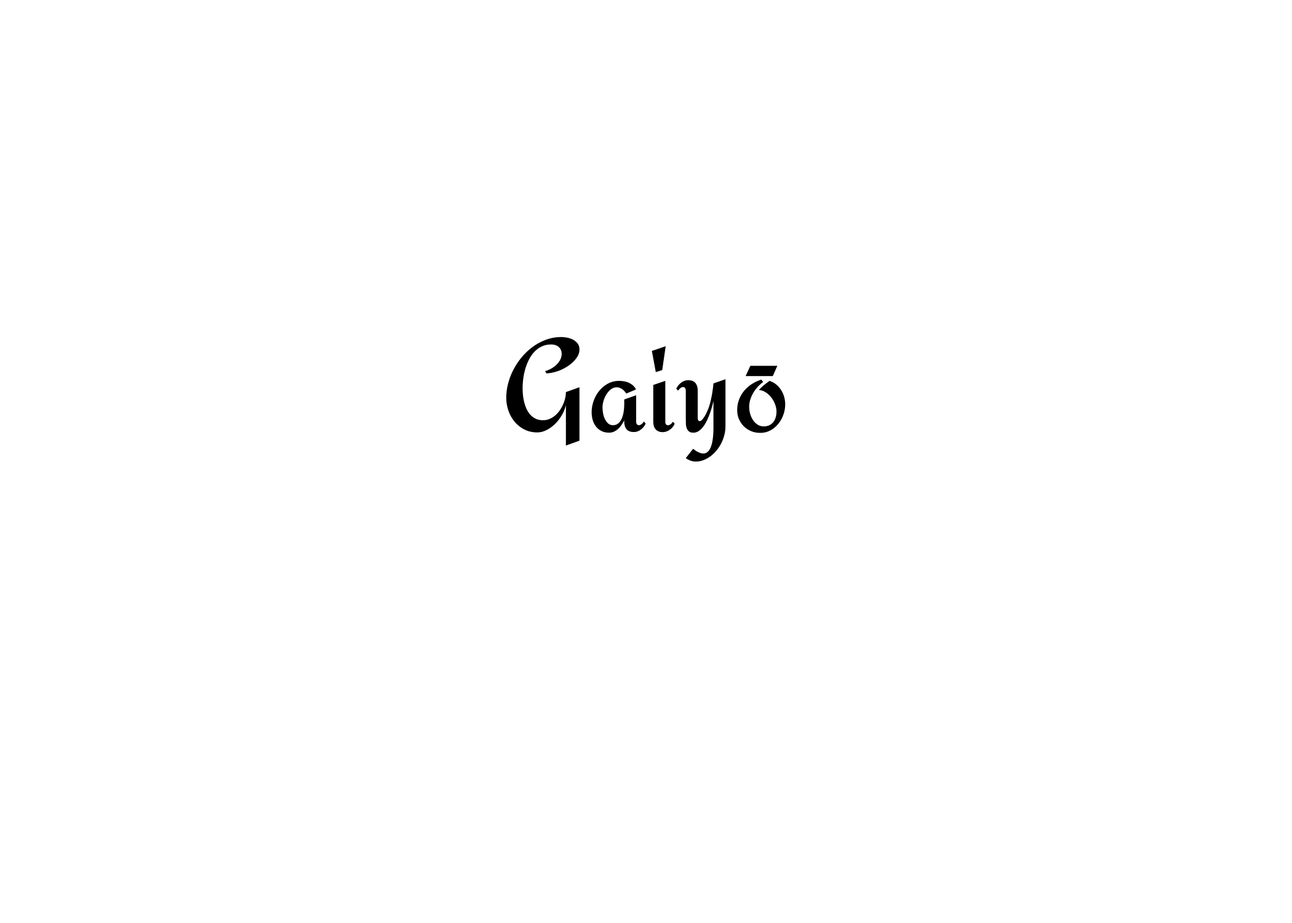
<style>
.page{position:relative;width:1292px;height:923px;background:#ffffff}
.page>*{position:absolute;margin:0}
.t1{font:133.3px "Redressed-Regular";color:#000000}
</style>
<div class="page">
<p class="t1" style="left:506px;top:337px;width:280px;height:125px">Gaiyō</p>
</div>
